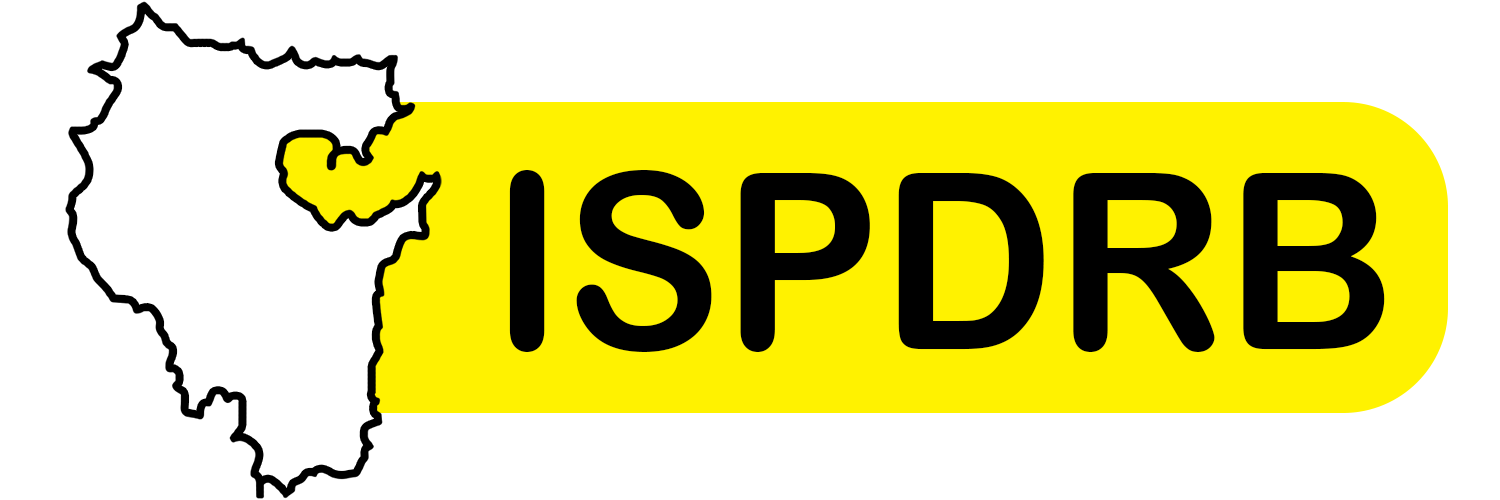
<style>
.page{position:relative;width:1500px;height:500px;background:#ffffff}
.page>*{position:absolute;margin:0}
.t1{font:245.9px "ArialRoundedMTBold";color:#000000;scale:0.96 1}
</style>
<div class="page">
<p class="t1" style="left:509px;top:170px;width:876px;height:182px">ISPDRB</p>
</div>
